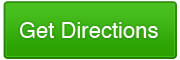
<style>
.page{position:relative;width:180px;height:60px}
.page>*{position:absolute;margin:0}
.t1{font:22px "Helvetica";color:#ffffff}
</style>
<div class="page">
<p class="t1" style="left:20px;top:22px;width:138px;height:16px">Get Directions</p>
</div>
